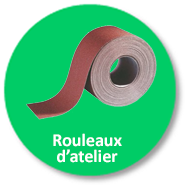
<style>
.page{position:relative;width:185px;height:185px;background:#00cc66}
.page>*{position:absolute;margin:0}
.t1{font:18px/16px "Calibri-Bold";color:#ffffff}
</style>
<div class="page">
<p class="t1" style="left:53px;top:133px;width:69px;height:30px;text-align:center">Rouleaux <br>d’atelier</p>
</div>
